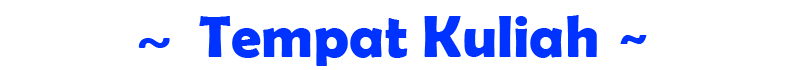
<style>
.page{position:relative;width:800px;height:70px;background:#ffffff}
.page>*{position:absolute;margin:0}
.t1{font:60px "BerlinSansFBDemi-Bold";color:#0033ff}
.t2{font:60px "ARJULIAN";color:#0033ff}
.t3{font:48px "ARJULIAN";color:#0033ff}
.t4{font:48px "ARESSENCE";color:#0033ff}
</style>
<div class="page">
<p class="t1" style="left:138px;top:15px;width:509px;height:51px"><span class="t2"> </span><span class="t3">~ </span>Tempat Kuliah<span class="t4"> ~</span></p>
</div>
